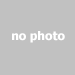
<style>
.page{position:relative;width:75px;height:75px;background:#c1c1c1}
.page>*{position:absolute;margin:0}
.t1{font:12px "Tahoma-Bold";color:#ffffff}
</style>
<div class="page">
<p class="t1" style="left:12px;top:31px;width:53px;height:12px">no photo</p>
</div>
